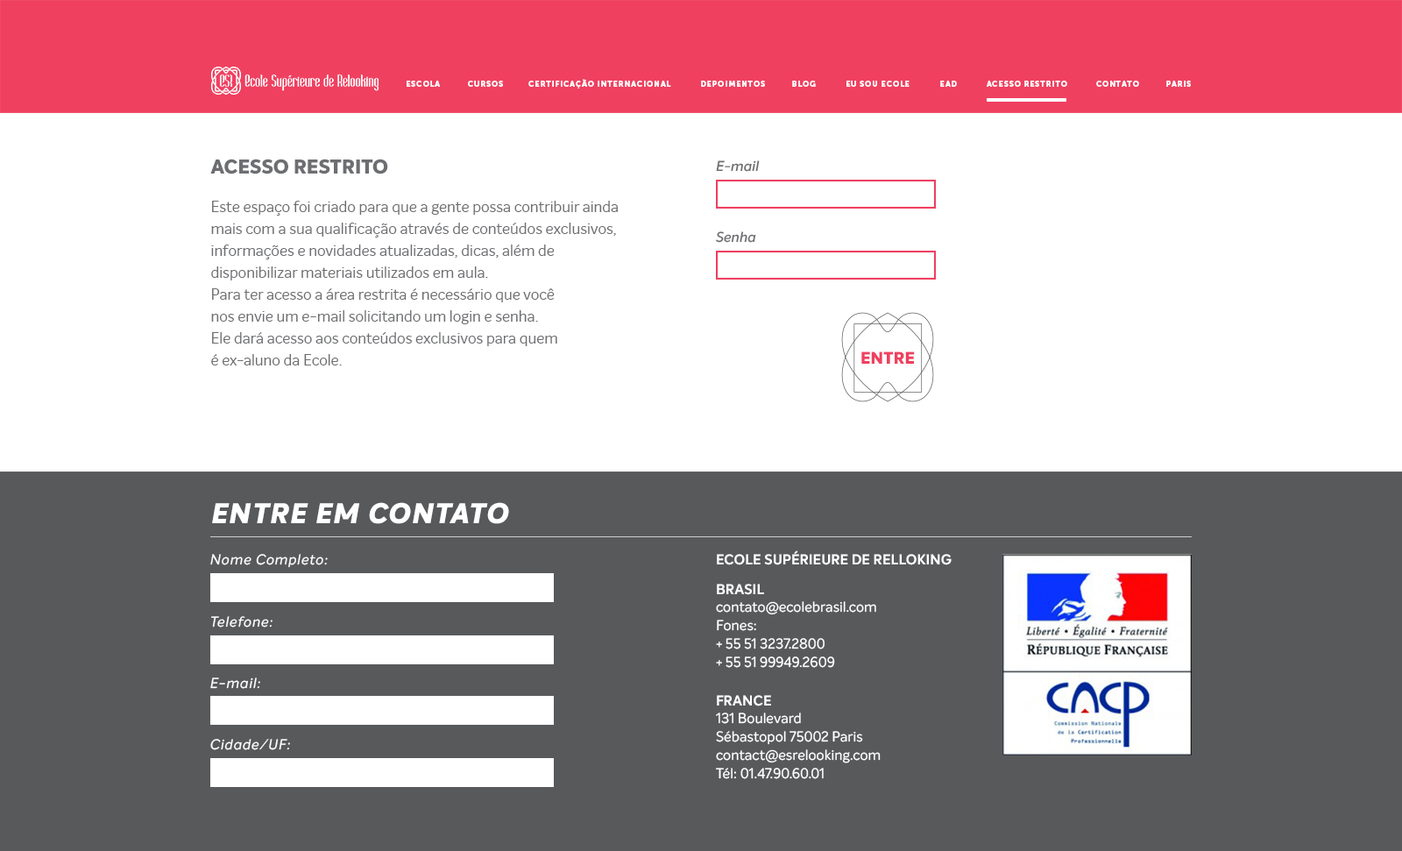
<style>
.page{position:relative;width:1402px;height:851px;background:#ffffff}
.page>*{position:absolute;margin:0}
.t1{font:7.9px "MuseoSans-900";letter-spacing:0.1em;color:#ffffff;text-transform:uppercase}
.t2{font:19.4px "InteloAlt-ExtraBold";color:#6d6e71;text-transform:uppercase}
.t3{font:14.1px "InteloAlt-SemiBoldItalic";color:#6d6e71}
.t4{font:14.6px/21.9px "InteloAlt-Regular";color:#6d6e71}
.t5{font:16.4px "InteloAlt-ExtraBold";color:#ef4060;text-transform:uppercase}
.t6{font:28px "InteloAlt-ExtraBoldItalic";letter-spacing:0.05em;color:#ffffff;text-transform:uppercase}
.t7{font:14.1px "InteloAlt-Italic";letter-spacing:0.05em;color:#ffffff}
.t8{font:14.1px "InteloAlt-Bold";color:#ffffff;text-transform:uppercase}
.t9{font:14.1px/18.3px "Intelo-Regular";color:#ffffff}
</style>
<div class="page">
<p class="t1" style="left:407px;top:81px;width:33px;height:6px">escola</p>
<p class="t1" style="left:468px;top:81px;width:35px;height:6px">cursos</p>
<p class="t1" style="left:528px;top:79px;width:143px;height:9px">CERTIFICAÇÃO internacional</p>
<p class="t1" style="left:701px;top:81px;width:64px;height:6px">depoimentos</p>
<p class="t1" style="left:792px;top:81px;width:24px;height:6px">blog</p>
<p class="t1" style="left:846px;top:81px;width:63px;height:6px">eu sou ecole</p>
<p class="t1" style="left:940px;top:81px;width:17px;height:6px">ead</p>
<p class="t1" style="left:986px;top:81px;width:81px;height:6px">ACESSO RESTRITO</p>
<p class="t1" style="left:1096px;top:81px;width:43px;height:6px">contato</p>
<p class="t1" style="left:1166px;top:81px;width:25px;height:6px">paris</p>
<p class="t2" style="left:210px;top:159px;width:178px;height:15px">acesso restrito</p>
<p class="t3" style="left:716px;top:160px;width:44px;height:12px">E-mail</p>
<p class="t4" style="left:211px;top:201px;width:407px;height:164px">Este espaço foi criado para que a gente possa contribuir ainda <br>mais com a sua qualificação através de conteúdos exclusivos, <br>informações e novidades atualizadas, dicas, além de <br>disponibilizar materiais utilizados em aula.<br>Para ter acesso a área restrita é necessário que você <br>nos envie um e-mail solicitando um login e senha. <br>Ele dará acesso aos conteúdos exclusivos para quem <br>é ex-aluno da Ecole.</p>
<p class="t3" style="left:716px;top:231px;width:40px;height:12px">Senha</p>
<p class="t5" style="left:861px;top:351px;width:54px;height:13px">entre</p>
<p class="t6" style="left:212px;top:502px;width:297px;height:22px">entre em contato</p>
<p class="t7" style="left:210px;top:554px;width:118px;height:14px">Nome Completo:</p>
<p class="t8" style="left:717px;top:550px;width:234px;height:15px">Ecole Supérieure de Relloking</p>
<p class="t8" style="left:717px;top:583px;width:47px;height:12px">BRASIL</p>
<p class="t9" style="left:716px;top:601px;width:160px;height:67px">contato@ecolebrasil.com<br>Fones: <br>+ 55 51 3237.2800 <br>+ 55 51 99949.2609</p>
<p class="t7" style="left:211px;top:616px;width:61px;height:11px">Telefone:</p>
<p class="t7" style="left:210px;top:677px;width:50px;height:12px">E-mail:</p>
<p class="t8" style="left:717px;top:695px;width:54px;height:11px">france</p>
<p class="t9" style="left:716px;top:712px;width:164px;height:67px">131 Boulevard <br>Sébastopol 75002 Paris<br>contact@esrelooking.com<br>Tél: 01.47.90.60.01</p>
<p class="t7" style="left:210px;top:739px;width:80px;height:11px">Cidade/UF:</p>
</div>
